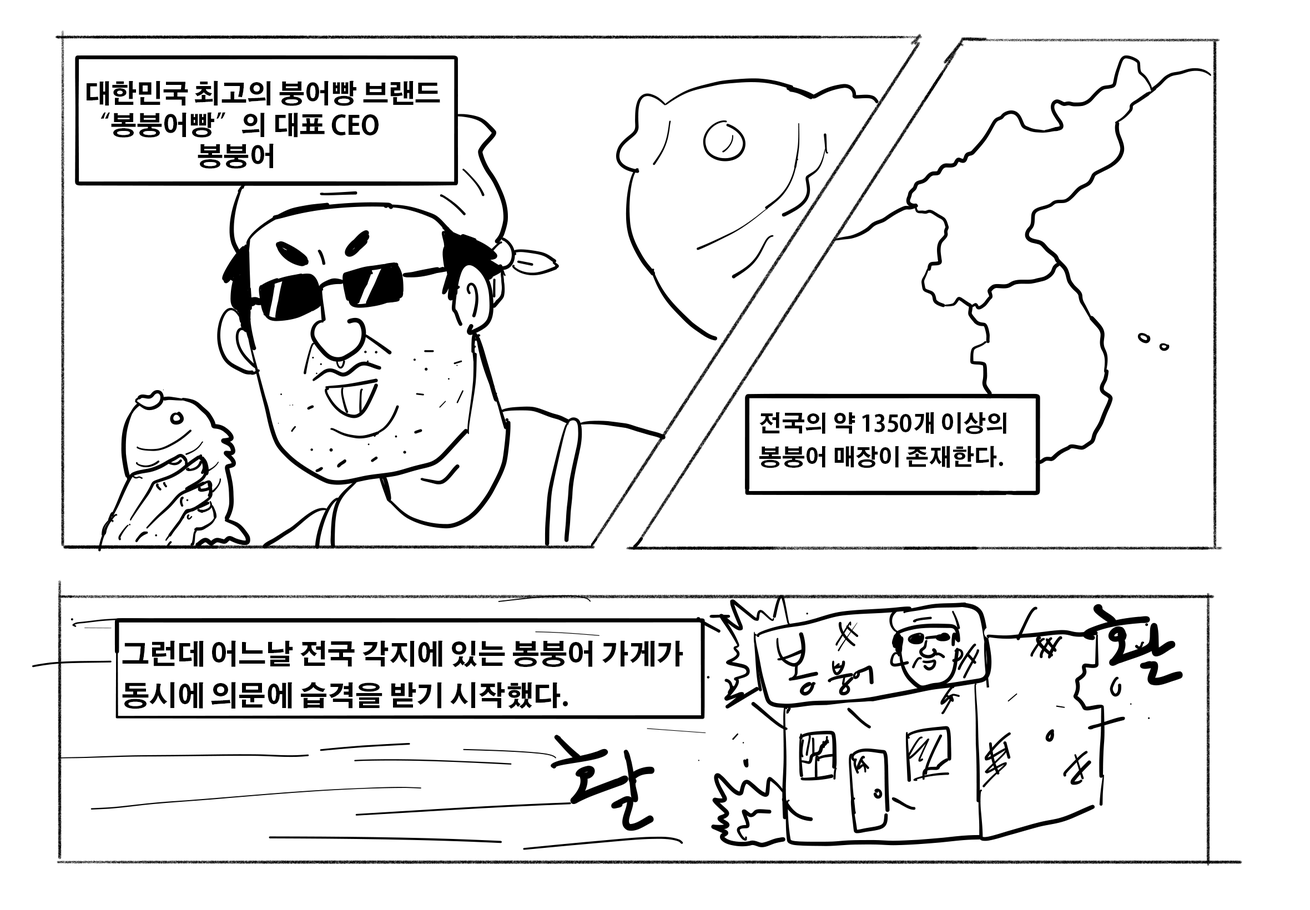
<style>
.page{position:relative;width:1310px;height:910px;background:#ffffff}
.page>*{position:absolute;margin:0}
.t1{font:26.1px "AdobeGothicStd-Bold";color:#000000}
.t2{font:22.8px "AdobeGothicStd-Bold";color:#000000}
.t3{font:27.7px "AdobeGothicStd-Bold";color:#000000}
</style>
<div class="page">
<p class="t1" style="left:87px;top:80px;width:353px;height:89px">대한민국 최고의 붕어빵 브랜드 <br>“봉붕어빵”의 대표 CEO <br>                    봉붕어</p>
<p class="t2" style="left:759px;top:412px;width:248px;height:56px">전국의 약 1350개 이상의 <br>봉붕어 매장이 존재한다.</p>
<p class="t3" style="left:122px;top:641px;width:561px;height:68px">그런데 어느날 전국 각지에 있는 봉붕어 가게가 <br>동시에 의문에 습격을 받기 시작했다.</p>
</div>
